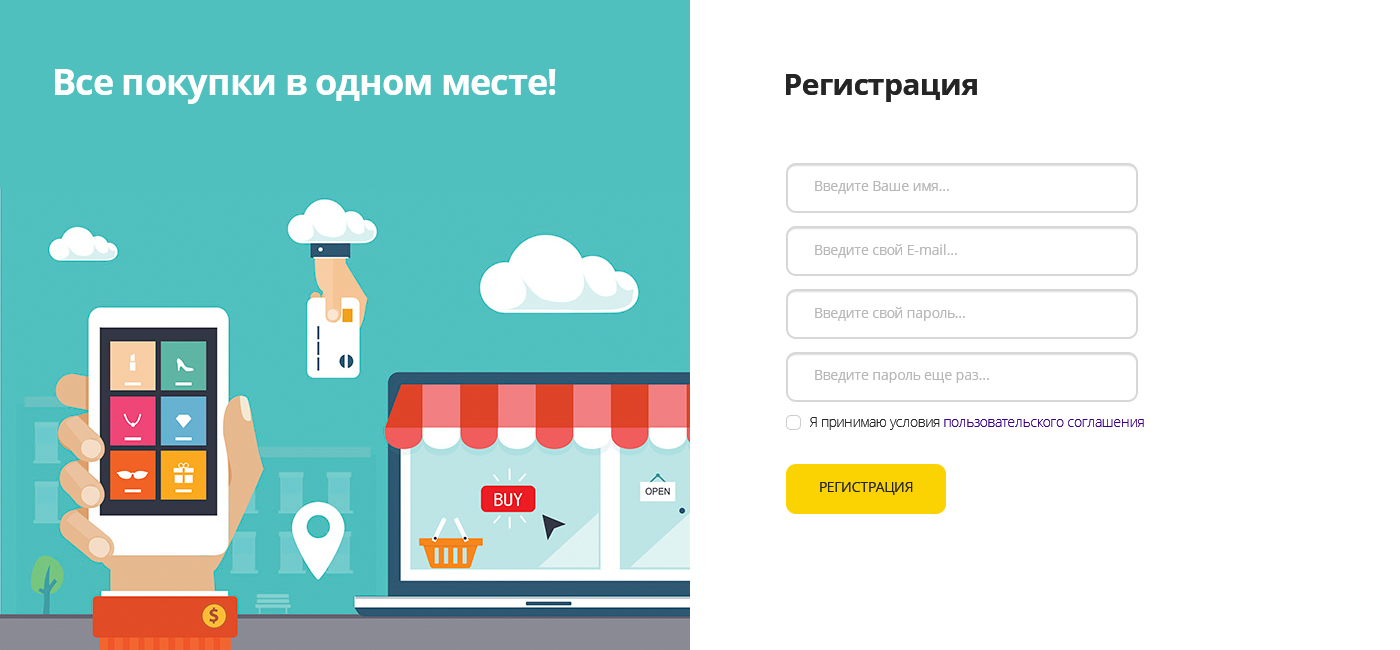
<style>
.page{position:relative;width:1400px;height:650px;background:#ffffff}
.page>*{position:absolute;margin:0}
.t1{font:36px "OpenSans-Bold";letter-spacing:-0.024em;color:#ffffff}
.t2{font:30px "OpenSans-Bold";letter-spacing:-0.024em;color:#252525}
.t3{font:14px "OpenSans";letter-spacing:-0.024em;color:#b7b7b7}
.t4{font:14px "OpenSans-Light";letter-spacing:-0.024em;color:#3b0086}
.t5{font:14px "OpenSans-Light";letter-spacing:-0.024em;color:#252525}
.t6{font:14px "OpenSans";letter-spacing:-0.024em;color:#252525}
</style>
<div class="page">
<p class="t1" style="left:55px;top:69px;width:501px;height:35px">Все покупки в одном месте!</p>
<p class="t2" style="left:786px;top:74px;width:191px;height:28px">Регистрация</p>
<p class="t3" style="left:815px;top:181px;width:134px;height:13px">Введите Ваше имя...</p>
<p class="t3" style="left:815px;top:244px;width:142px;height:14px">Введите свой E-mail...</p>
<p class="t3" style="left:815px;top:307px;width:150px;height:14px">Введите свой пароль...</p>
<p class="t3" style="left:815px;top:370px;width:174px;height:13px">Введите пароль еще раз...</p>
<p class="t4" style="left:810px;top:417px;width:334px;height:13px"><span class="t5">Я принимаю условия </span>пользовательского соглашения</p>
<p class="t6" style="left:820px;top:482px;width:93px;height:13px">РЕГИСТРАЦИЯ</p>
</div>
